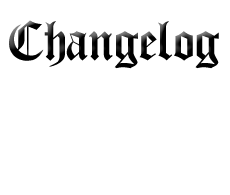
<style>
.page{position:relative;width:230px;height:195px;background:#ffffff}
.page>*{position:absolute;margin:0}
.t1{font:60px "Oldchristmas-Regular";color:#000000}
</style>
<div class="page">
<p class="t1" style="left:9px;top:20px;width:210px;height:49px">Changelog</p>
</div>
